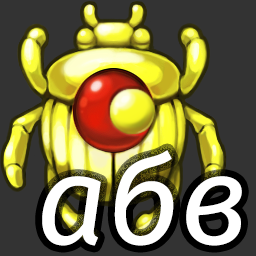
<style>
.page{position:relative;width:256px;height:256px;background:#333333}
.page>*{position:absolute;margin:0}
.t1{font:125.1px "FiraSans-Italic";color:#ffffff}
</style>
<div class="page">
<p class="t1" style="left:42px;top:150px;width:200px;height:96px">абв</p>
</div>
